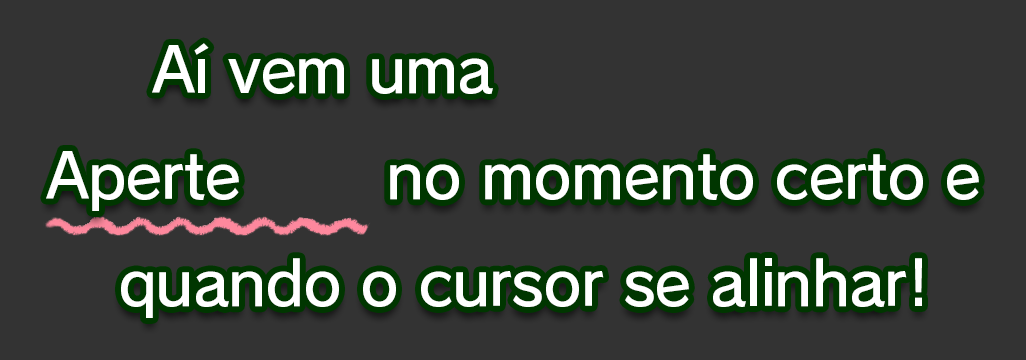
<style>
.page{position:relative;width:1026px;height:360px;background:#333333}
.page>*{position:absolute;margin:0}
.t1{font:61.3px/106.7px "RodinPro-DB";letter-spacing:-0.022em;color:#ffffff}
.t2{font:69.3px/106.7px "NewRodinPro-DB";letter-spacing:-0.022em;color:#ffffff}
</style>
<div class="page">
<p class="t1" style="left:46px;top:39px;width:933px;height:279px;text-align:center">Aí vem uma <span class="t2">Nota Azul!<br></span>Aperte <span class="t2">ZR</span> no momento certo e <br>quando o cursor se alinhar!</p>
</div>
